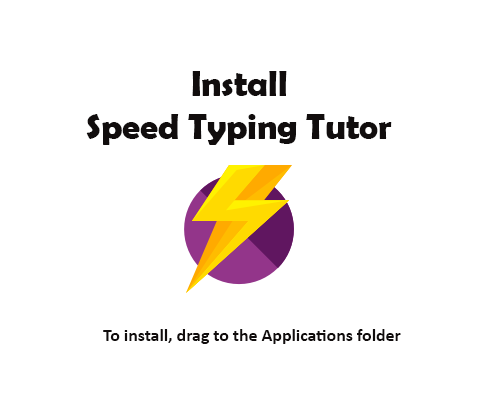
<style>
.page{position:relative;width:500px;height:401px;background:#ffffff}
.page>*{position:absolute;margin:0}
.t1{font:36px "BerlinSansFBDemi-Bold";letter-spacing:-0.005em;color:#110d0d}
.t2{font:18px "Calibri-Bold";letter-spacing:-0.005em;color:#110d0d}
</style>
<div class="page">
<p class="t1" style="left:86px;top:71px;width:306px;height:74px;text-align:center">Install<br>Speed Typing Tutor</p>
<p class="t2" style="left:103px;top:329px;width:298px;height:15px">To install, drag to the Applications folder</p>
</div>
